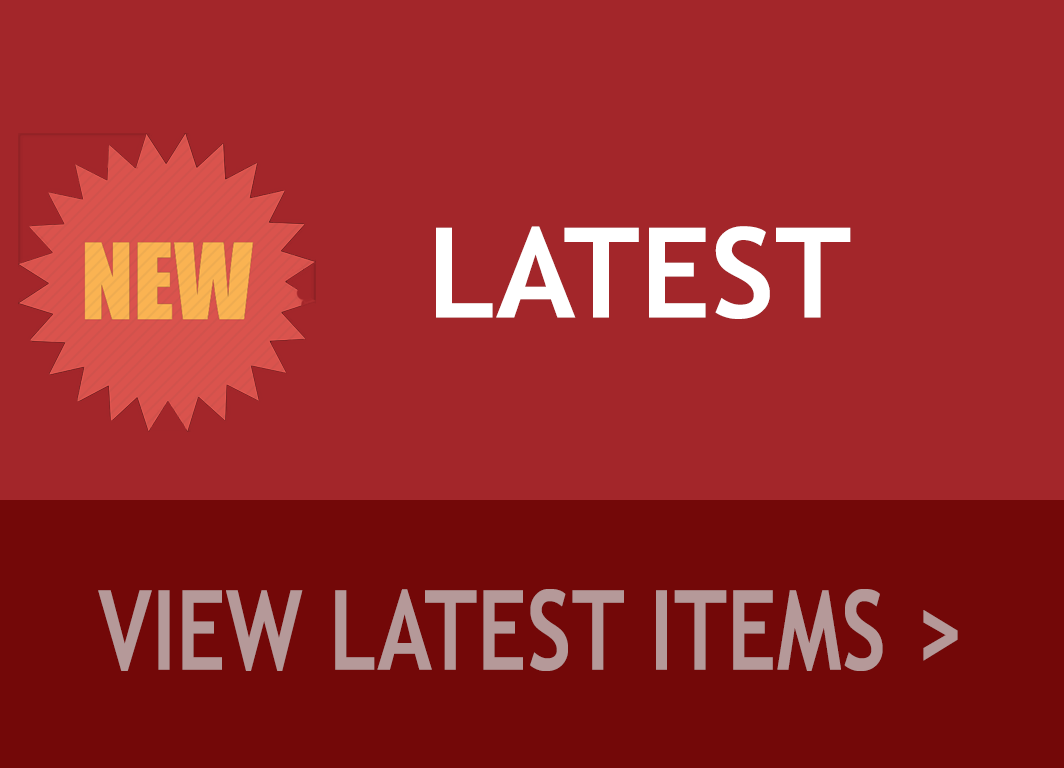
<style>
.page{position:relative;width:1064px;height:768px;background:#a3262a}
.page>*{position:absolute;margin:0}
.t1{font:125px "TrebuchetMS-Bold";color:#ffffff}
.t2{font:110.9px "TrebuchetMS-Bold";color:#b59999;scale:0.79 1}
</style>
<div class="page">
<p class="t1" style="left:436px;top:226px;width:415px;height:93px">LATEST</p>
<p class="t2" style="left:98px;top:589px;width:860px;height:82px">VIEW LATEST ITEMS &gt;</p>
</div>
